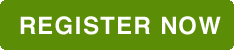
<style>
.page{position:relative;width:234px;height:50px;background:#5c8d06}
.page>*{position:absolute;margin:0}
.t1{font:24px "Helvetica-Bold";letter-spacing:0.05em;color:#ffffff}
</style>
<div class="page">
<p class="t1" style="left:20px;top:16px;width:201px;height:19px">REGISTER NOW</p>
</div>
